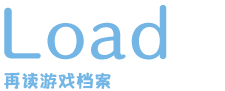
<style>
.page{position:relative;width:225px;height:91px;background:#ffffff}
.page>*{position:absolute;margin:0}
.t1{font:17.8px "shetumodengxiaofangti";color:#73b5e4;font-weight:bold}
</style>
<div class="page">
<p class="t1" style="left:4px;top:72px;width:107px;height:17px">再读游戏档案</p>
</div>
